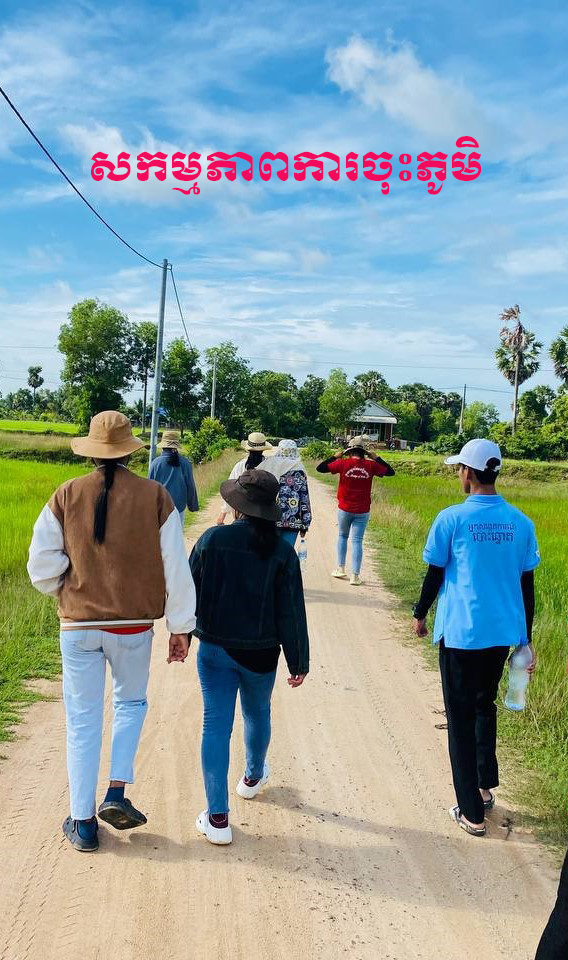
<style>
.page{position:relative;width:568px;height:960px}
.page>*{position:absolute;margin:0}
.t1{font:40px "KhmerOSMuolLight";color:#f20a5c}
</style>
<div class="page">
<p class="t1" style="left:91px;top:136px;width:391px;height:59px">សកម្មភាពការចុះភូមិ</p>
</div>
